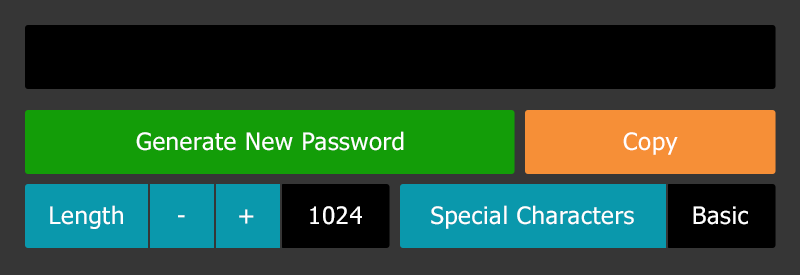
<style>
.page{position:relative;width:800px;height:275px;background:#363636}
.page>*{position:absolute;margin:0}
.t1{font:24px "Tahoma";letter-spacing:0.025em;color:#ffffff}
</style>
<div class="page">
<p class="t1" style="left:136px;top:131px;width:268px;height:20px">Generate New Password</p>
<p class="t1" style="left:623px;top:132px;width:55px;height:23px">Copy</p>
<p class="t1" style="left:50px;top:205px;width:73px;height:24px">Length</p>
<p class="t1" style="left:239px;top:209px;width:15px;height:15px">+</p>
<p class="t1" style="left:310px;top:206px;width:52px;height:19px">1024</p>
<p class="t1" style="left:431px;top:205px;width:203px;height:24px">Special Characters</p>
<p class="t1" style="left:693px;top:206px;width:55px;height:19px">Basic</p>
<p class="t1" style="left:178px;top:215px;width:7px;height:3px">-</p>
</div>
